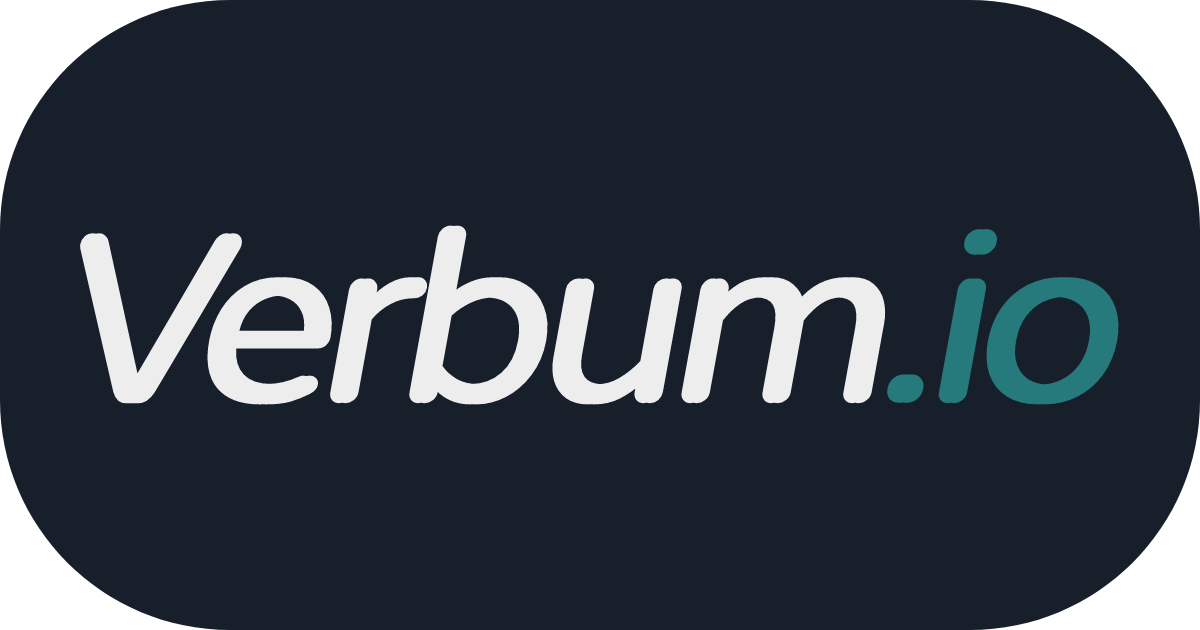
<style>
.page{position:relative;width:1200px;height:630px;background:#171f2b}
.page>*{position:absolute;margin:0}
.t1{font:240px "VarelaRound-Regular";letter-spacing:-0.08em;color:#ffffff;font-weight:bold;font-style:italic}
.t2{font:240px "VarelaRound-Regular";letter-spacing:-0.08em;color:#278282;font-weight:bold;font-style:italic}
</style>
<div class="page">
<p class="t1" style="left:79px;top:225px;width:1042px;height:180px;opacity:0.92">Verbum<span class="t2">.io</span></p>
</div>
